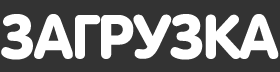
<style>
.page{position:relative;width:280px;height:72px;background:#333333}
.page>*{position:absolute;margin:0}
.t1{font:61px "VAGWorld-Bold";color:#ffffff}
</style>
<div class="page">
<p class="t1" style="left:1px;top:14px;width:278px;height:46px">ЗАГРУЗКА</p>
</div>
